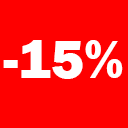
<style>
.page{position:relative;width:128px;height:128px;background:#fe0000}
.page>*{position:absolute;margin:0}
.t1{font:56.1px "FranklinGothic-Heavy";color:#fffefe}
</style>
<div class="page">
<p class="t1" style="left:3px;top:40px;width:120px;height:39px">-15%</p>
</div>
